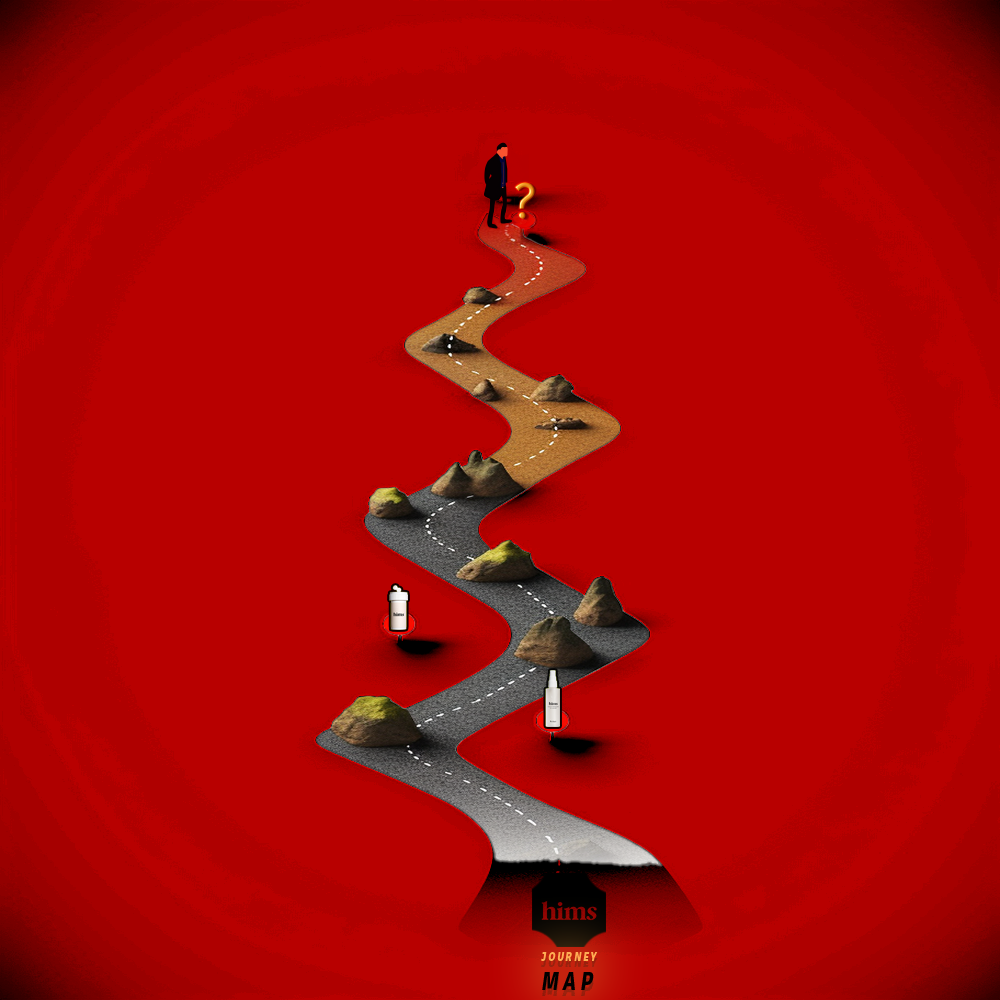
<style>
.page{position:relative;width:1000px;height:1000px;background:#b80000}
.page>*{position:absolute;margin:0}
.t1{font:12.3px "EbonyXb";letter-spacing:0.26em;color:#fead53;text-transform:uppercase;font-style:italic;scale:0.72 1}
.t2{font:24.6px "EbonyXb";letter-spacing:0.26em;color:#000000;text-transform:uppercase;font-style:italic;scale:0.72 1}
</style>
<div class="page">
<p class="t1" style="left:541px;top:952px;width:57px;height:9px">JOURNEY</p>
<p class="t2" style="left:542px;top:972px;width:52px;height:18px">MAP</p>
</div>
